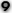
<style>
.page{position:relative;width:12px;height:13px}
.page>*{position:absolute;margin:0}
.t1{font:13.9px "K2D-ExtraBold";color:#000000}
</style>
<div class="page">
<p class="t1" style="left:1px;top:1px;width:9px;height:10px">9</p>
</div>
